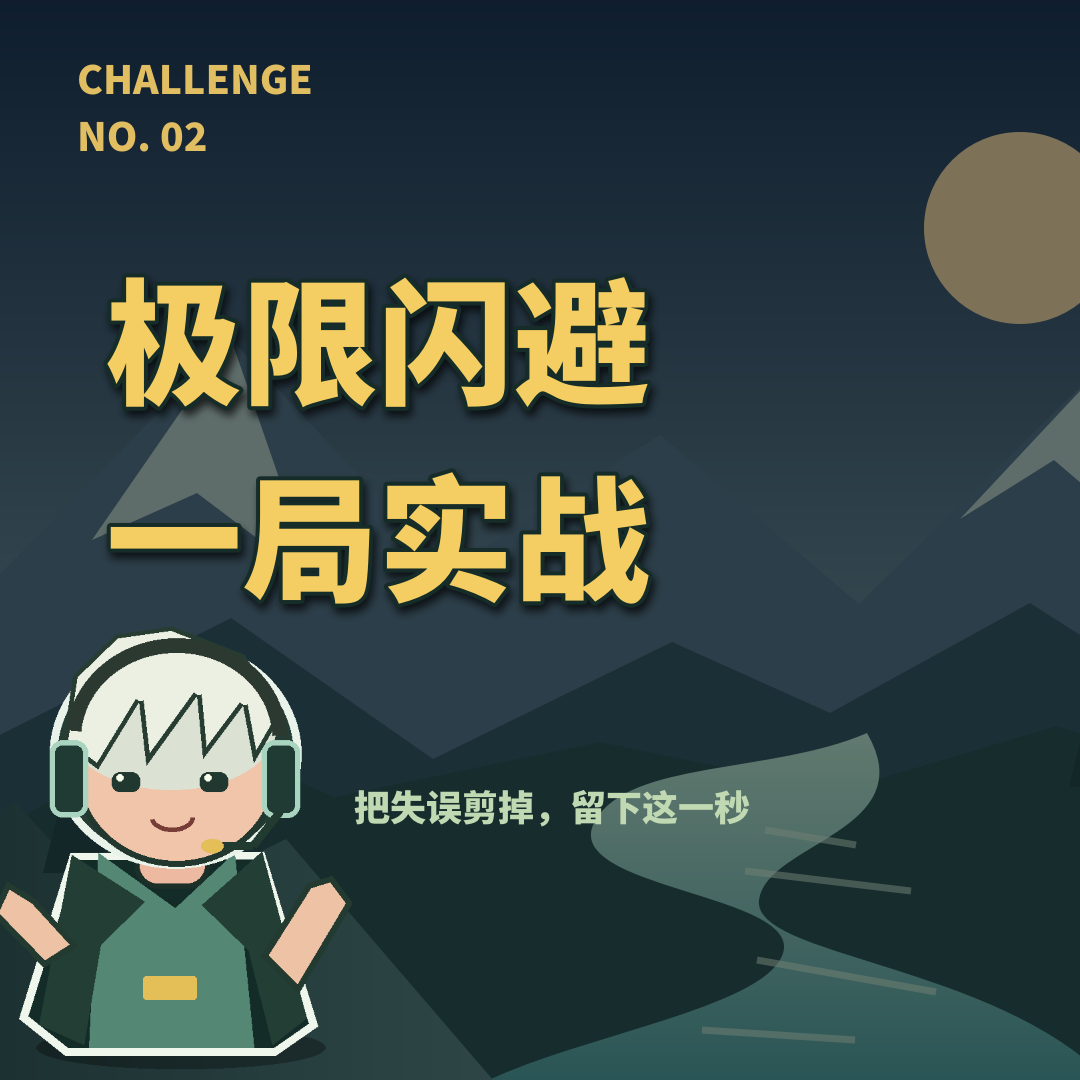
<style>
.page{position:relative;width:1080px;height:1080px}
.page>*{position:absolute;margin:0}
.t1{font:39px "SourceHanSansSC-Heavy";color:#e1be62}
.t2{font:136px "SourceHanSansSC-Heavy";color:#f4ce62}
.t3{font:36px "SourceHanSansSC-Heavy";color:#c0d9b2}
</style>
<div class="page">
<p class="t1" style="left:73px;top:45px;width:760px;height:122px">CHALLENGE<br>NO. 02</p>
<p class="t2" style="left:80px;top:210px;width:920px;height:446px">极限闪避<br>一局实战</p>
<p class="t3" style="left:350px;top:775px;width:700px;height:61px">把失误剪掉，留下这一秒</p>
</div>
